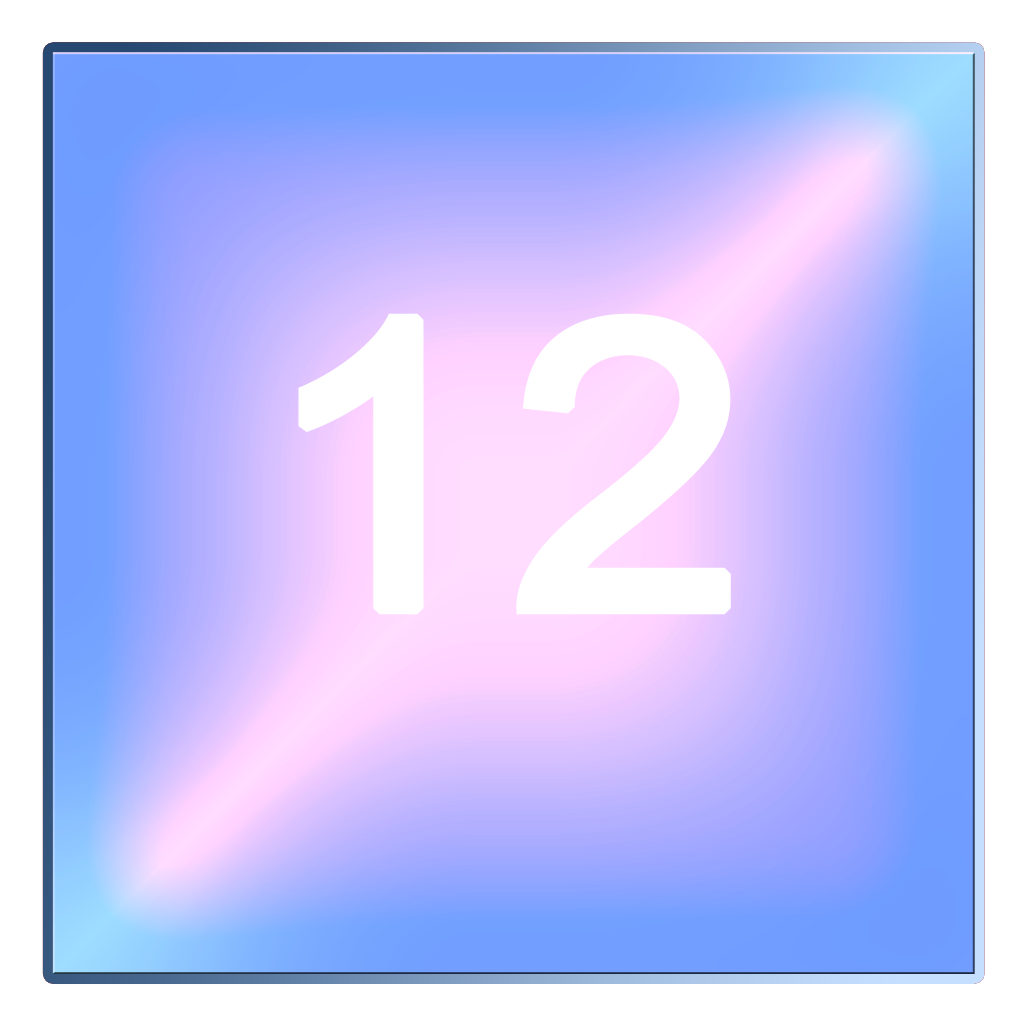
<style>
.page{position:relative;width:1024px;height:1024px}
.page>*{position:absolute;margin:0}
.t1{font:400px "ArialNarrow";color:#ffffff;font-weight:bold;scale:1.3 1}
</style>
<div class="page">
<p class="t1" style="left:298px;top:313px;width:433px;height:302px">12</p>
</div>
